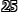
<style>
.page{position:relative;width:18px;height:12px;background:#ffffff}
.page>*{position:absolute;margin:0}
.t1{font:17px "Perpetua-Bold";color:#ffffff}
</style>
<div class="page">
<p class="t1" style="left:2px;top:1px;width:15px;height:10px">25</p>
</div>
